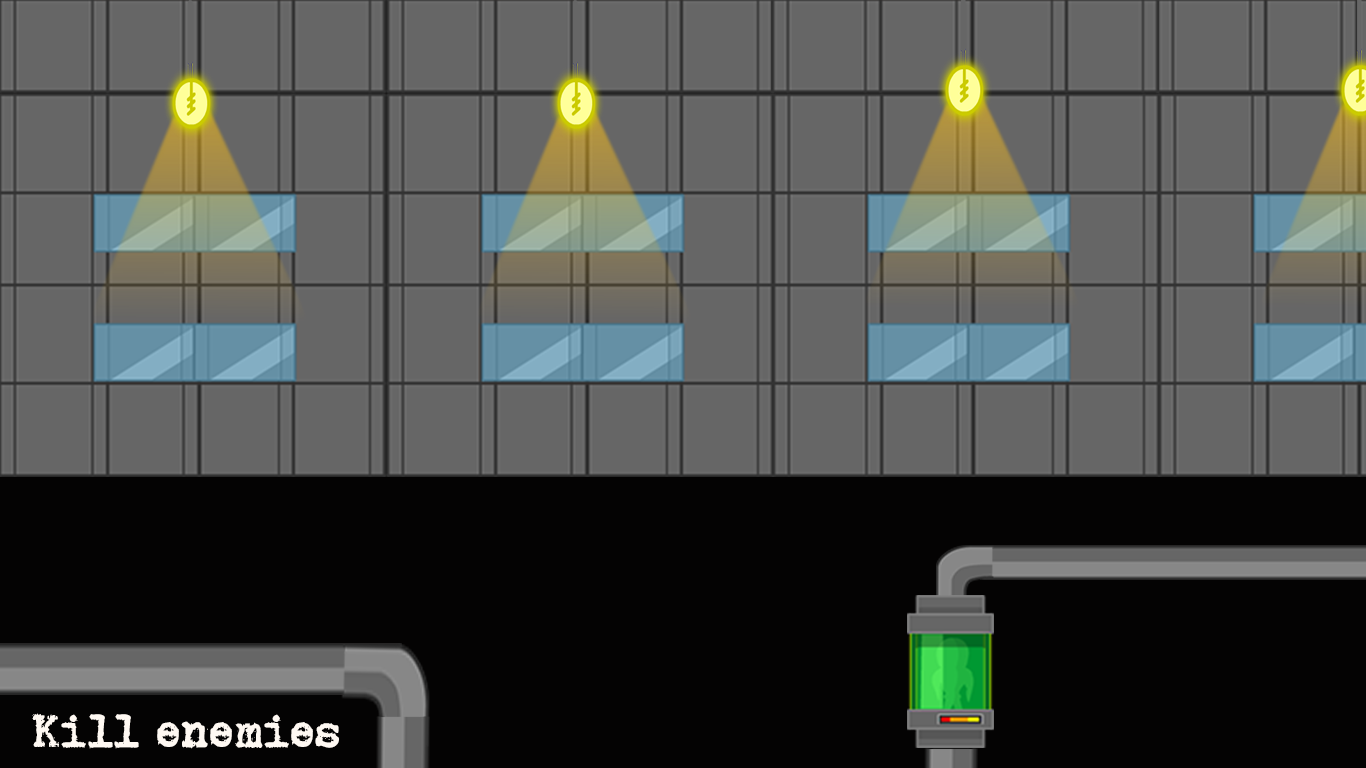
<style>
.page{position:relative;width:1366px;height:768px;background:#666666}
.page>*{position:absolute;margin:0}
.t1{font:45.8px "BrotherDeluxe1350Font";color:#fff9f3}
</style>
<div class="page">
<p class="t1" style="left:32px;top:713px;width:307px;height:36px">Kill enemies</p>
</div>
